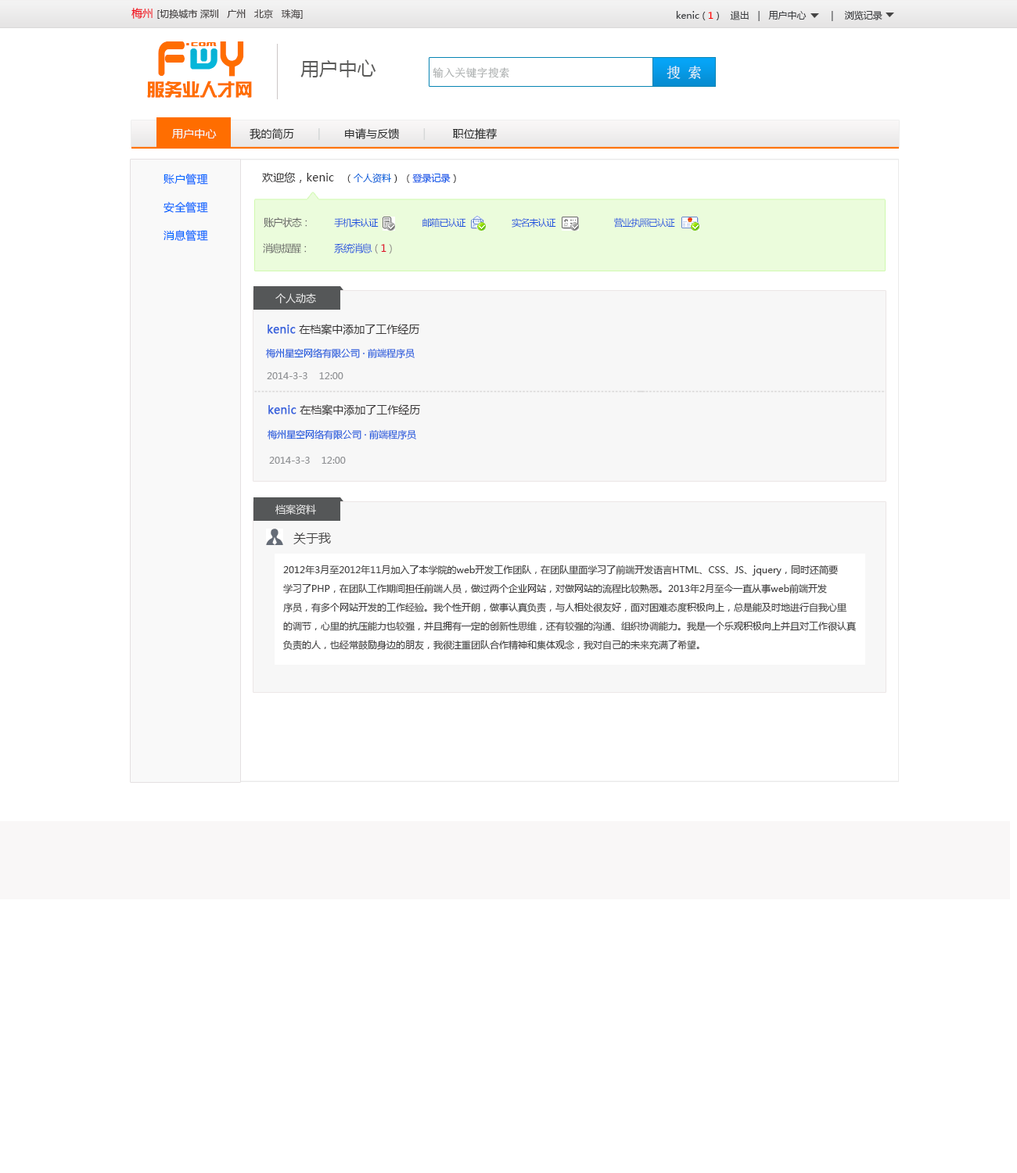
<style>
.page{position:relative;width:1017px;height:1173px;background:#ffffff}
.page>*{position:absolute;margin:0}
.t1{font:9.4px "MicrosoftYaHei";color:#444040}
.t2{font:10.9px "MicrosoftYaHei";color:#f00717}
.t3{font:9.4px "MicrosoftYaHei";color:#3a3c3f}
.t4{font:9.4px "MicrosoftYaHei";color:#ff0000}
.t5{font:43.2px "QuantumRound(BRK)";letter-spacing:0.01em;color:#ff6e01;font-weight:bold;scale:0.74 1}
.t6{font:34.1px "roundabout";letter-spacing:0.01em;color:#ff6e01;font-weight:bold;scale:0.91 1}
.t7{font:7.8px "Underwhelmed(BRK)";letter-spacing:0.01em;color:#ff6d01}
.t8{font:9.8px "VarianceBRK";letter-spacing:0.01em;color:#ff6e01}
.t9{font:18.8px "MicrosoftYaHei";letter-spacing:0.01em;color:#5b5b5a}
.t10{font:14.1px "SimSun";letter-spacing:0.01em;color:#f4f9f9}
.t11{font:10.9px "SimSun";letter-spacing:0.01em;color:#a7abab}
.t12{font:17.2px "SingyiEG-Ultra-GB";letter-spacing:0.01em;color:#ff6e01}
.t13{font:10.9px "MicrosoftYaHei";letter-spacing:0.01em;color:#262727}
.t14{font:10.9px "MicrosoftYaHei";letter-spacing:0.01em;color:#f4f9f9}
.t15{font:10.9px "MicrosoftYaHei";letter-spacing:0.01em;color:#cfd3d3}
.t16{font:10.9px "MicrosoftYaHei";letter-spacing:0.01em;color:#d5d7d7}
.t17{font:10.9px/28.2px "MicrosoftYaHei";letter-spacing:0.01em;color:#0066ff}
.t18{font:10.9px "MicrosoftYaHei";letter-spacing:0.01em;color:#302e2e}
.t19{font:9.4px "MicrosoftYaHei";color:#302e2e}
.t20{font:9.4px "MicrosoftYaHei";color:#0766dc}
.t21{font:9.4px "MicrosoftYaHei";color:#0656e9}
.t22{font:9.4px "MicrosoftYaHei";letter-spacing:-0.08em;color:#2255dd}
.t23{font:10.2px "MicrosoftYaHei";letter-spacing:-0.08em;color:#666666}
.t24{font:10.2px "MicrosoftYaHei";letter-spacing:-0.08em;color:#2255dd}
.t25{font:10.2px "MicrosoftYaHei";letter-spacing:-0.08em;color:#847d7e}
.t26{font:10.2px "MicrosoftYaHei";letter-spacing:-0.08em;color:#dc0d21}
.t27{font:10.2px "MicrosoftYaHei";color:#eaeaea}
.t28{font:10.9px "MicrosoftYaHei";color:#3a3838}
.t29{font:10.9px "MicrosoftYaHei";color:#3a65dd;font-weight:bold}
.t30{font:9.4px "MicrosoftYaHei";color:#235cdd}
.t31{font:9.4px "MicrosoftYaHei";color:#909295}
.t32{font:12.5px "MicrosoftYaHei";color:#3f3e3e}
.t33{font:9.4px/18.8px "MicrosoftYaHei";color:#3f3e3e}
</style>
<div class="page">
<p class="t1" style="left:131px;top:8px;width:172px;height:11px"><span class="t2">梅州 </span>[切换城市 深圳   广州   北京   珠海]</p>
<p class="t3" style="left:676px;top:10px;width:206px;height:11px">kenic ( <span class="t4">1 </span>)    退出   |   用户中心         |    浏览记录</p>
<p class="t5" style="left:158px;top:41px;width:27px;height:35px">f</p>
<p class="t6" style="left:220px;top:41px;width:24px;height:36px">y</p>
<p class="t7" style="left:186px;top:43px;width:3px;height:2px">.</p>
<p class="t8" style="left:191px;top:42px;width:26px;height:4px">com</p>
<p class="t9" style="left:300px;top:59px;width:76px;height:18px">用户中心</p>
<p class="t10" style="left:666px;top:66px;width:35px;height:13px">搜 索</p>
<p class="t11" style="left:432px;top:67px;width:77px;height:11px">输入关键字搜索</p>
<p class="t12" style="left:147px;top:81px;width:105px;height:17px">服务业人才网</p>
<p class="t13" style="left:172px;top:128px;width:325px;height:12px"><span class="t14">用户中心   </span>       我的简历      <span class="t15"> |  </span>     申请与反馈       <span class="t16">| </span>       职位推荐</p>
<p class="t17" style="left:163px;top:174px;width:45px;height:68px">账户管理<br>安全管理<br>消息管理</p>
<p class="t18" style="left:262px;top:172px;width:194px;height:11px">欢迎您，kenic   <span class="t19">（</span><span class="t20">个人资料</span><span class="t19">） （</span><span class="t21">登录记录</span><span class="t19">）</span></p>
<p class="t22" style="left:264px;top:217px;width:411px;height:11px"><span class="t23">账户状态：           </span>手机未认证                      邮箱已认证                       实名未认证                             营业执照已认证</p>
<p class="t23" style="left:263px;top:243px;width:129px;height:11px">消息提醒：         <span class="t24">  系统消息</span><span class="t25">（</span><span class="t26">1</span><span class="t25">）</span></p>
<p class="t27" style="left:275px;top:293px;width:41px;height:10px">个人动态</p>
<p class="t28" style="left:267px;top:324px;width:152px;height:11px"><span class="t29">kenic </span>在档案中添加了工作经历</p>
<p class="t30" style="left:266px;top:348px;width:148px;height:10px">梅州星空网络有限公司 · 前端程序员</p>
<p class="t31" style="left:267px;top:372px;width:76px;height:7px">2014-3-3    12:00</p>
<p class="t28" style="left:268px;top:404px;width:152px;height:12px"><span class="t29">kenic </span>在档案中添加了工作经历</p>
<p class="t30" style="left:267px;top:429px;width:149px;height:10px">梅州星空网络有限公司 · 前端程序员</p>
<p class="t31" style="left:269px;top:457px;width:77px;height:7px">2014-3-3    12:00</p>
<p class="t27" style="left:275px;top:504px;width:41px;height:11px">档案资料</p>
<p class="t32" style="left:293px;top:533px;width:38px;height:11px">关于我</p>
<p class="t33" style="left:283px;top:565px;width:573px;height:85px">2012年3月至2012年11月加入了本学院的web开发工作团队，在团队里面学习了前端开发语言HTML、CSS、JS、jquery，同时还简要<br>学习了PHP，在团队工作期间担任前端人员，做过两个企业网站，对做网站的流程比较熟悉。2013年2月至今一直从事web前端开发<br>序员，有多个网站开发的工作经验。我个性开朗，做事认真负责，与人相处很友好，面对困难态度积极向上，总是能及时地进行自我心里<br>的调节，心里的抗压能力也较强，并且拥有一定的创新性思维，还有较强的沟通、组织协调能力。我是一个乐观积极向上并且对工作很认真<br>负责的人，也经常鼓励身边的朋友，我很注重团队合作精神和集体观念，我对自己的未来充满了希望。</p>
</div>
